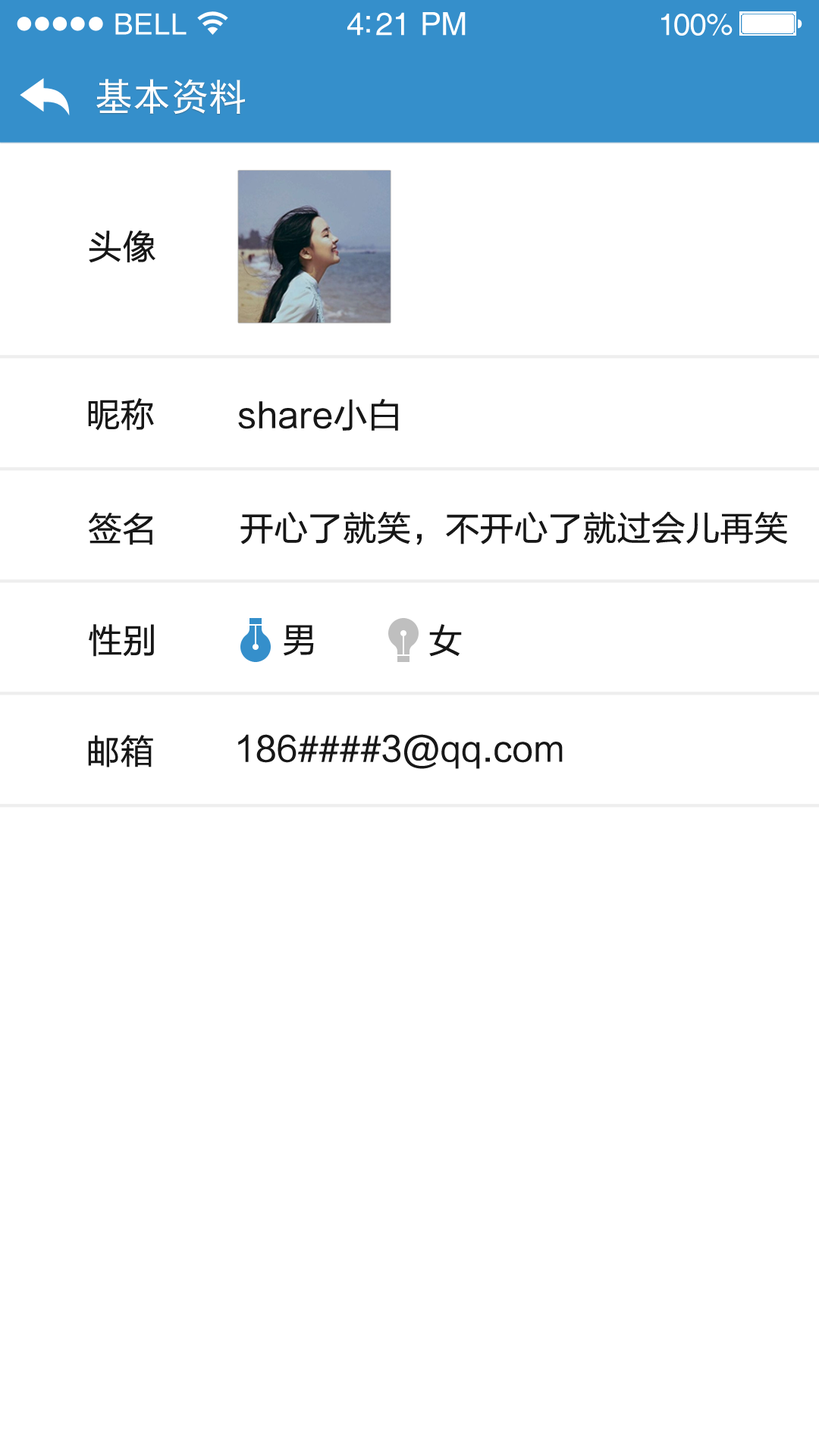
<style>
.page{position:relative;width:819px;height:1456px;background:#ffffff}
.page>*{position:absolute;margin:0}
.t1{font:29.3px "Helvetica";letter-spacing:0.02em;color:#ffffff}
.t2{font:31.8px "Helvetica";letter-spacing:-0.02em;color:#ffffff}
.t3{font:30.6px "Helvetica";letter-spacing:-0.02em;color:#ffffff}
.t4{font:37.9px "SimHei";color:#ffffff}
.t5{font:34.1px "FZLTHJW--GB1-0";letter-spacing:0.01em;color:#171717}
.t6{font:34.1px "FZLTHJW--GB1-0";letter-spacing:0.005em;color:#171717}
</style>
<div class="page">
<p class="t1" style="left:115px;top:13px;width:72px;height:22px">BELL</p>
<p class="t2" style="left:347px;top:12px;width:119px;height:24px">4:21 PM</p>
<p class="t3" style="left:661px;top:14px;width:72px;height:22px">100%</p>
<p class="t4" style="left:96px;top:79px;width:149px;height:36px">基本资料</p>
<p class="t5" style="left:89px;top:231px;width:66px;height:31px">头像</p>
<p class="t5" style="left:88px;top:398px;width:66px;height:33px">昵称</p>
<p class="t5" style="left:238px;top:399px;width:160px;height:32px">share小白</p>
<p class="t5" style="left:89px;top:513px;width:63px;height:32px">签名</p>
<p class="t6" style="left:240px;top:511px;width:547px;height:34px">开心了就笑，不开心了就过会儿再笑</p>
<p class="t5" style="left:89px;top:624px;width:65px;height:33px">性别</p>
<p class="t5" style="left:284px;top:625px;width:30px;height:31px">男</p>
<p class="t5" style="left:429px;top:624px;width:33px;height:33px">女</p>
<p class="t5" style="left:88px;top:735px;width:65px;height:32px">邮箱</p>
<p class="t5" style="left:238px;top:734px;width:325px;height:35px">186####3@qq.com</p>
</div>
